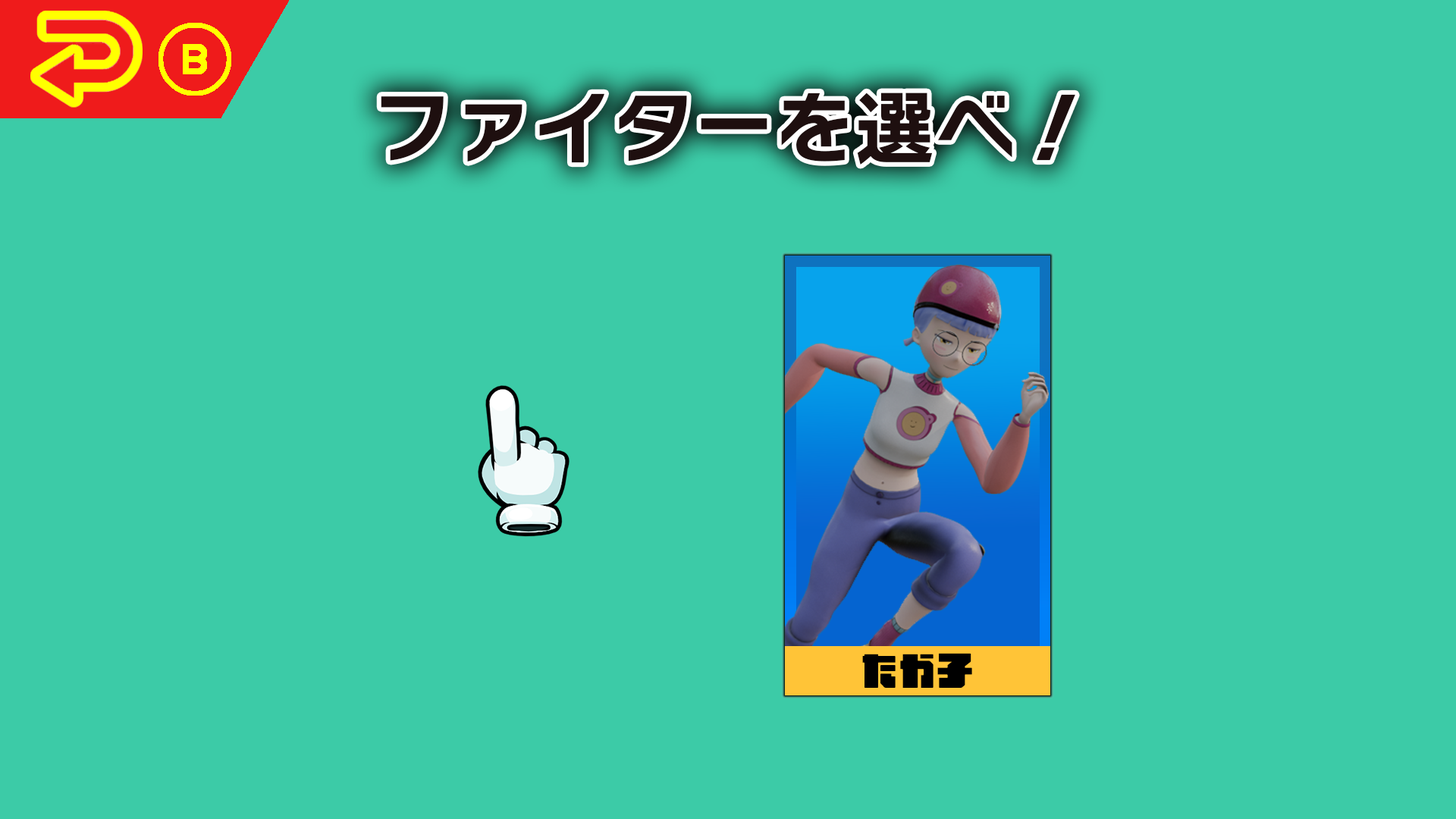
<style>
.page{position:relative;width:1456px;height:819px;background:#3ccba7}
.page>*{position:absolute;margin:0}
.t1{font:80.4px "NitalagoRuika-06";color:#1e0f0f}
</style>
<div class="page">
<p class="t1" style="left:381px;top:93px;width:694px;height:72px">ファイターを選べ！</p>
</div>
